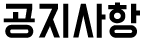
<style>
.page{position:relative;width:142px;height:41px;background:#ffffff}
.page>*{position:absolute;margin:0}
.t1{font:36px "BMDoHyeon";color:#000000}
</style>
<div class="page">
<p class="t1" style="left:3px;top:2px;width:137px;height:36px">공지사항</p>
</div>
